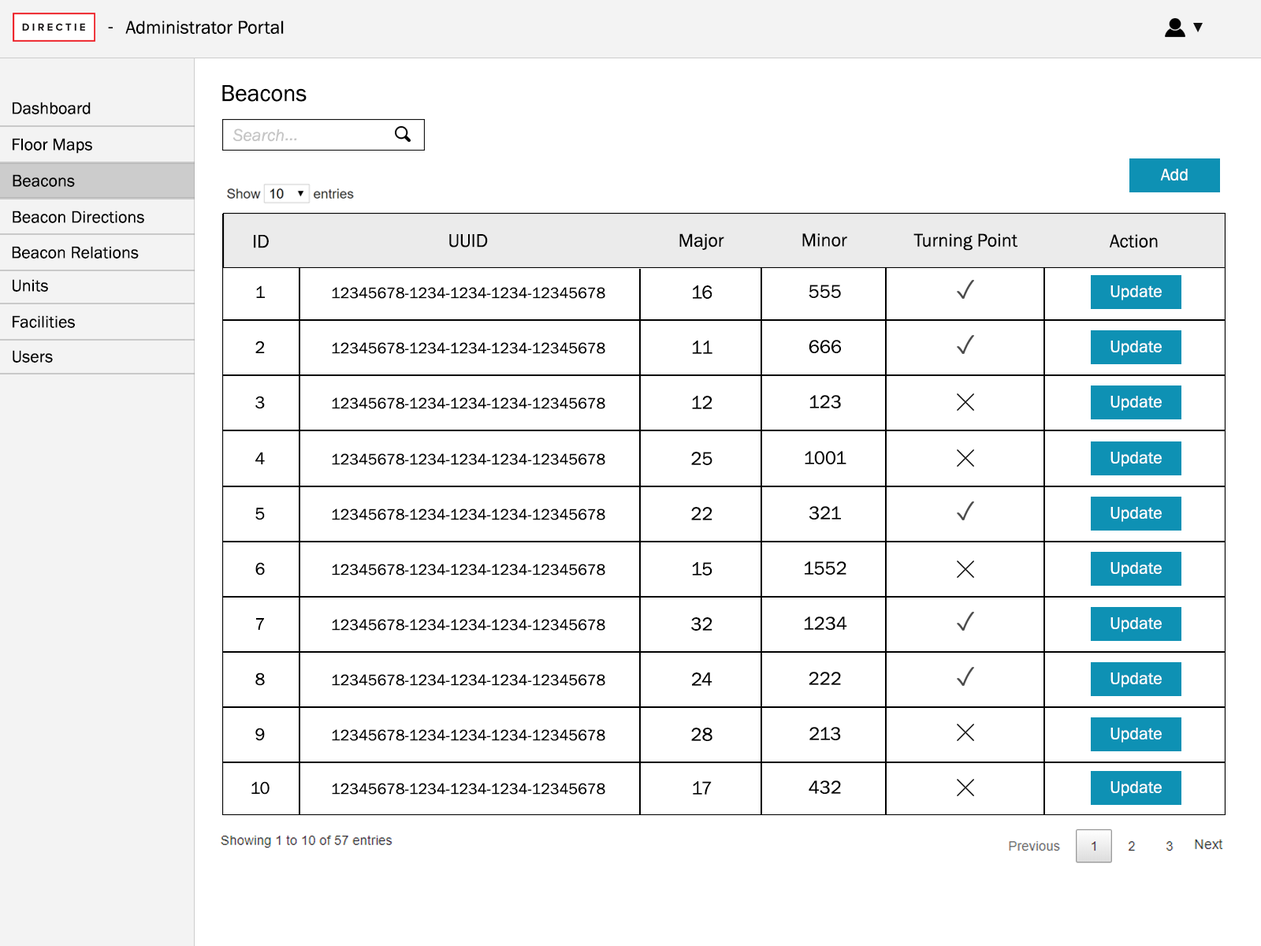
<style>
.page{position:relative;width:1261px;height:946px;background:#ffffff}
.page>*{position:absolute;margin:0}
.t1{font:18.9px "FranklinGothic-Book";color:#000000}
.t2{font:23.6px "FranklinGothic-Book";color:#000000}
.t3{font:17.3px "FranklinGothic-Book";color:#000000}
.t4{font:17.3px "FranklinGothic-Book";color:#ffffff}
.t5{font:15.8px "FranklinGothic-Book";color:#000000}
</style>
<div class="page">
<p class="t1" style="left:108px;top:27px;width:5px;height:1px">-</p>
<p class="t1" style="left:125px;top:20px;width:159px;height:14px">Administrator Portal</p>
<p class="t2" style="left:222px;top:85px;width:85px;height:17px">Beacons</p>
<p class="t3" style="left:13px;top:102px;width:78px;height:12px">Dashboard</p>
<p class="t3" style="left:13px;top:138px;width:79px;height:16px">Floor Maps</p>
<p class="t4" style="left:1160px;top:169px;width:28px;height:11px">Add</p>
<p class="t3" style="left:13px;top:174px;width:62px;height:13px">Beacons</p>
<p class="t3" style="left:13px;top:210px;width:131px;height:13px">Beacon Directions</p>
<p class="t1" style="left:679px;top:233px;width:45px;height:17px">Major</p>
<p class="t1" style="left:802px;top:233px;width:45px;height:14px">Minor</p>
<p class="t1" style="left:913px;top:233px;width:104px;height:18px">Turning Point</p>
<p class="t3" style="left:12px;top:246px;width:127px;height:12px">Beacon Relations</p>
<p class="t1" style="left:254px;top:235px;width:15px;height:13px">ID</p>
<p class="t1" style="left:449px;top:234px;width:39px;height:13px">UUID</p>
<p class="t1" style="left:1109px;top:234px;width:49px;height:14px">Action</p>
<p class="t3" style="left:13px;top:279px;width:35px;height:13px">Units</p>
<p class="t3" style="left:256px;top:285px;width:9px;height:13px">1</p>
<p class="t5" style="left:332px;top:287px;width:273px;height:12px">12345678-1234-1234-1234-12345678</p>
<p class="t1" style="left:693px;top:285px;width:19px;height:14px">16</p>
<p class="t1" style="left:809px;top:284px;width:32px;height:14px">555</p>
<p class="t4" style="left:1110px;top:285px;width:52px;height:15px">Update</p>
<p class="t3" style="left:13px;top:315px;width:62px;height:13px">Facilities</p>
<p class="t3" style="left:255px;top:340px;width:10px;height:13px">2</p>
<p class="t1" style="left:692px;top:340px;width:20px;height:14px">11</p>
<p class="t1" style="left:809px;top:340px;width:32px;height:13px">666</p>
<p class="t4" style="left:1110px;top:340px;width:52px;height:15px">Update</p>
<p class="t3" style="left:13px;top:350px;width:40px;height:13px">Users</p>
<p class="t5" style="left:332px;top:342px;width:273px;height:12px">12345678-1234-1234-1234-12345678</p>
<p class="t3" style="left:255px;top:396px;width:10px;height:13px">3</p>
<p class="t5" style="left:332px;top:397px;width:273px;height:12px">12345678-1234-1234-1234-12345678</p>
<p class="t1" style="left:692px;top:396px;width:20px;height:13px">12</p>
<p class="t1" style="left:809px;top:395px;width:32px;height:13px">123</p>
<p class="t4" style="left:1110px;top:396px;width:52px;height:15px">Update</p>
<p class="t3" style="left:255px;top:452px;width:10px;height:12px">4</p>
<p class="t5" style="left:332px;top:453px;width:273px;height:12px">12345678-1234-1234-1234-12345678</p>
<p class="t1" style="left:691px;top:452px;width:21px;height:13px">25</p>
<p class="t1" style="left:805px;top:451px;width:41px;height:13px">1001</p>
<p class="t4" style="left:1110px;top:452px;width:52px;height:15px">Update</p>
<p class="t3" style="left:255px;top:508px;width:10px;height:12px">5</p>
<p class="t5" style="left:332px;top:508px;width:273px;height:12px">12345678-1234-1234-1234-12345678</p>
<p class="t1" style="left:691px;top:507px;width:21px;height:13px">22</p>
<p class="t1" style="left:809px;top:506px;width:32px;height:13px">321</p>
<p class="t4" style="left:1110px;top:507px;width:52px;height:15px">Update</p>
<p class="t3" style="left:255px;top:562px;width:10px;height:13px">6</p>
<p class="t5" style="left:332px;top:563px;width:273px;height:12px">12345678-1234-1234-1234-12345678</p>
<p class="t1" style="left:692px;top:562px;width:20px;height:13px">15</p>
<p class="t1" style="left:805px;top:561px;width:41px;height:14px">1552</p>
<p class="t4" style="left:1110px;top:562px;width:52px;height:15px">Update</p>
<p class="t3" style="left:256px;top:618px;width:8px;height:12px">7</p>
<p class="t1" style="left:691px;top:617px;width:21px;height:13px">32</p>
<p class="t1" style="left:804px;top:616px;width:43px;height:14px">1234</p>
<p class="t4" style="left:1110px;top:617px;width:52px;height:15px">Update</p>
<p class="t5" style="left:332px;top:619px;width:273px;height:11px">12345678-1234-1234-1234-12345678</p>
<p class="t3" style="left:255px;top:672px;width:10px;height:14px">8</p>
<p class="t5" style="left:332px;top:674px;width:273px;height:12px">12345678-1234-1234-1234-12345678</p>
<p class="t1" style="left:692px;top:672px;width:20px;height:14px">24</p>
<p class="t1" style="left:809px;top:671px;width:32px;height:14px">222</p>
<p class="t4" style="left:1110px;top:672px;width:52px;height:15px">Update</p>
<p class="t3" style="left:255px;top:727px;width:10px;height:14px">9</p>
<p class="t5" style="left:332px;top:729px;width:273px;height:12px">12345678-1234-1234-1234-12345678</p>
<p class="t1" style="left:691px;top:727px;width:21px;height:14px">28</p>
<p class="t1" style="left:809px;top:727px;width:32px;height:13px">213</p>
<p class="t4" style="left:1110px;top:727px;width:52px;height:15px">Update</p>
<p class="t3" style="left:251px;top:781px;width:19px;height:13px">10</p>
<p class="t5" style="left:332px;top:783px;width:273px;height:11px">12345678-1234-1234-1234-12345678</p>
<p class="t1" style="left:693px;top:781px;width:19px;height:13px">17</p>
<p class="t1" style="left:809px;top:780px;width:32px;height:14px">432</p>
<p class="t4" style="left:1110px;top:781px;width:52px;height:15px">Update</p>
</div>
